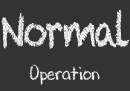
<style>
.page{position:relative;width:130px;height:91px;background:#333333}
.page>*{position:absolute;margin:0}
.t1{font:20px/56px "DJBChalkItUp";scale:0.9 1}
.t2{font:46px/56px "Chalkduster";letter-spacing:-0.08em;scale:0.75 1}
</style>
<div class="page">
<p class="t1" style="left:1px;top:9px;width:129px;height:76px;text-align:center"><span class="t2">Normal<br></span>Operation</p>
</div>
